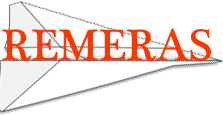
<style>
.page{position:relative;width:223px;height:115px;background:#ffffff}
.page>*{position:absolute;margin:0}
.t1{font:45px "PlantagenetCherokee";color:#ff3600}
</style>
<div class="page">
<p class="t1" style="left:2px;top:28px;width:209px;height:33px">REMERAS</p>
</div>
